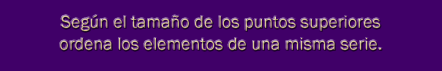
<style>
.page{position:relative;width:442px;height:71px;background:#400068}
.page>*{position:absolute;margin:0}
.t1{font:18px/22.2px "FranklinGothic-Book";color:#d4c088}
</style>
<div class="page">
<p class="t1" style="left:60px;top:15px;width:322px;height:36px;text-align:center">Según el tamaño de los puntos superiores<br>ordena los elementos de una misma serie.</p>
</div>
